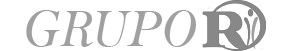
<style>
.page{position:relative;width:289px;height:51px;background:#ffffff}
.page>*{position:absolute;margin:0}
.t1{font:55px "BellMTItalic";color:#a0a0a0;scale:0.92 1}
</style>
<div class="page">
<p class="t1" style="left:26px;top:10px;width:170px;height:37px">GRUPO</p>
</div>
